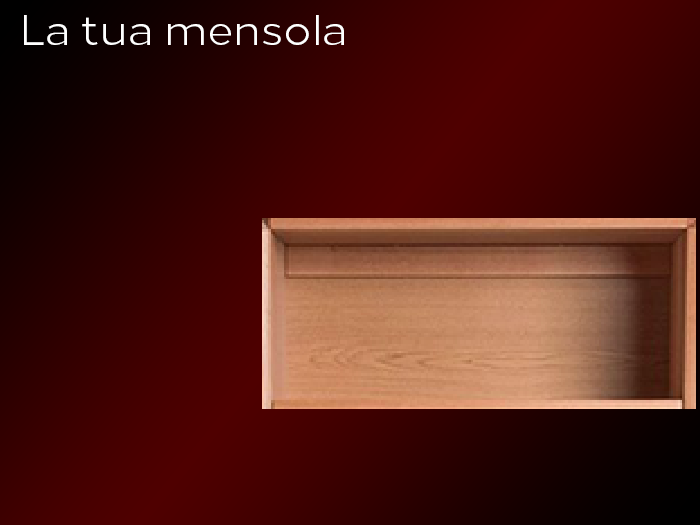
<style>
.page{position:relative;width:700px;height:525px}
.page>*{position:absolute;margin:0}
.t1{font:42px "Loew-Regular";color:#ffffff}
</style>
<div class="page">
<p class="t1" style="left:24px;top:15px;width:320px;height:30px">La tua mensola</p>
</div>
